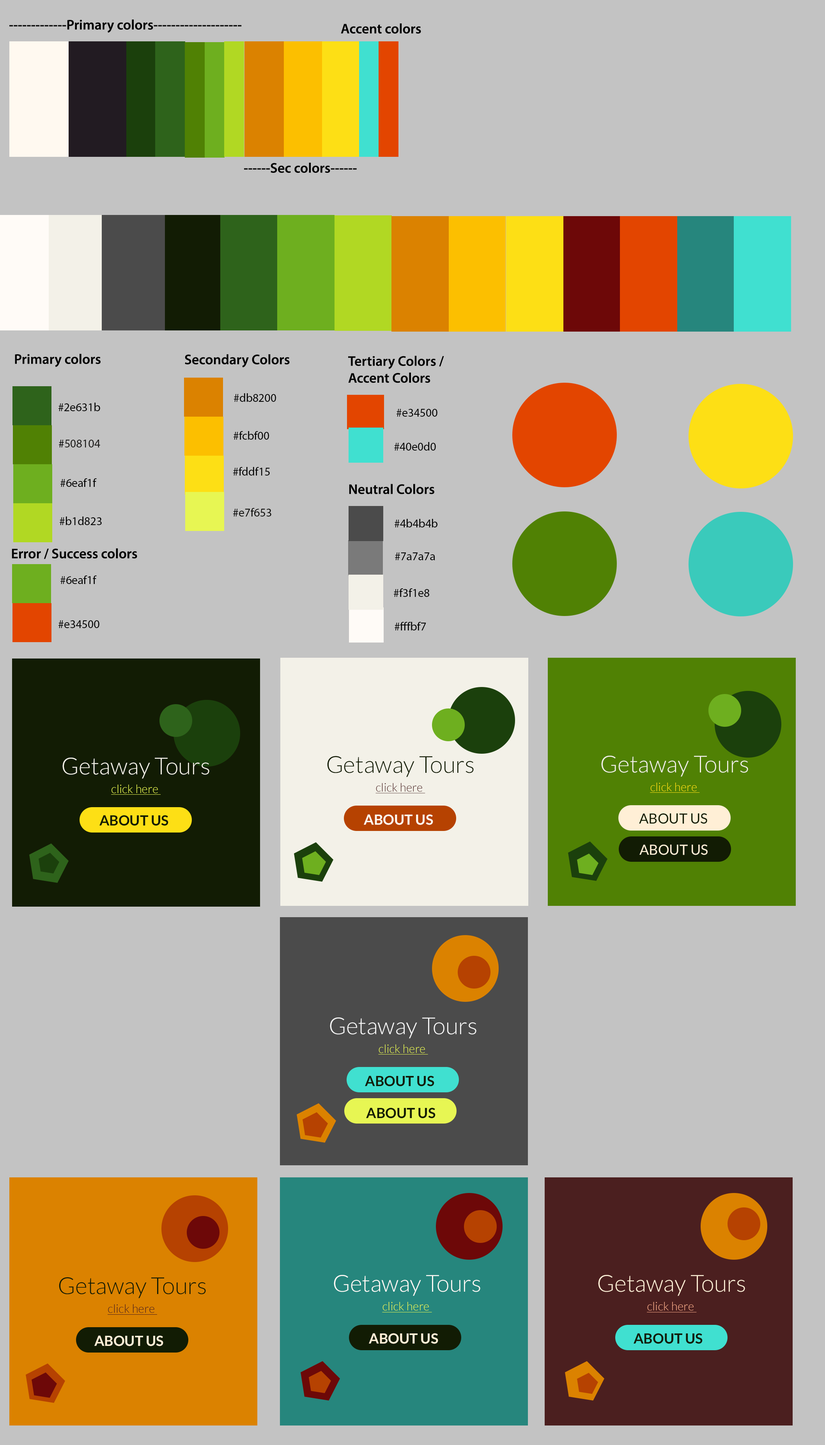
<style>
.page{position:relative;width:825px;height:1445px;background:#c3c3c3}
.page>*{position:absolute;margin:0}
.t1{font:14px "MyriadPro-Semibold";color:#000000}
.t2{font:11.7px "MyriadPro-Regular";color:#000000}
.t3{font:11.7px "MyriadPro-Regular";color:#181716}
.t4{font:11.7px "MyriadPro-Regular";color:#0c0c0a}
.t5{font:23.4px "Lato-Light";color:#f3f1e8}
.t6{font:23.4px "Lato-Light";color:#121c04}
.t7{font:11.7px "Lato-Light";color:#e7f653;text-decoration:underline}
.t8{font:11.7px "Lato-Light";color:#4b1f1f;text-decoration:underline}
.t9{font:11.7px "Lato-Light";color:#fddf15;text-decoration:underline}
.t10{font:14px "Lato-Bold";color:#121c04}
.t11{font:14px "Lato-Bold";color:#fff9f0}
.t12{font:14px "Lato-Regular";color:#121c04}
.t13{font:14px "Lato-Regular";color:#ffefd6}
.t14{font:23.4px "Lato-Light";color:#f7f7f7}
.t15{font:23.4px "Lato-Light";color:#fffbf7}
.t16{font:23.4px "Lato-Light";color:#ffefd6}
.t17{font:11.7px "Lato-Light";color:#f9aa89;text-decoration:underline}
.t18{font:14px "Lato-Bold";color:#ffefd6}
</style>
<div class="page">
<p class="t1" style="left:9px;top:20px;width:233px;height:13px">-------------Primary colors--------------------</p>
<p class="t1" style="left:341px;top:23px;width:80px;height:11px">Accent colors</p>
<p class="t1" style="left:244px;top:163px;width:113px;height:10px">------Sec colors------</p>
<p class="t1" style="left:15px;top:354px;width:86px;height:13px">Primary colors</p>
<p class="t1" style="left:185px;top:354px;width:105px;height:13px">Secondary Colors</p>
<p class="t1" style="left:348px;top:356px;width:96px;height:27px">Tertiary Colors / <br>Accent Colors</p>
<p class="t2" style="left:234px;top:393px;width:42px;height:9px">#db8200</p>
<p class="t2" style="left:59px;top:403px;width:41px;height:8px">#2e631b</p>
<p class="t2" style="left:397px;top:409px;width:41px;height:8px">#e34500</p>
<p class="t2" style="left:234px;top:431px;width:35px;height:9px">#fcbf00</p>
<p class="t3" style="left:59px;top:440px;width:41px;height:7px"><span class="t2">#</span>508104</p>
<p class="t2" style="left:394px;top:442px;width:42px;height:9px">#40e0d0</p>
<p class="t2" style="left:233px;top:467px;width:37px;height:8px">#fddf15</p>
<p class="t2" style="left:60px;top:478px;width:37px;height:9px">#6eaf1f</p>
<p class="t1" style="left:349px;top:484px;width:86px;height:10px">Neutral Colors</p>
<p class="t4" style="left:233px;top:508px;width:38px;height:8px"><span class="t2">#</span>e7f653</p>
<p class="t2" style="left:60px;top:516px;width:42px;height:9px">#b1d823</p>
<p class="t2" style="left:395px;top:519px;width:43px;height:8px">#4b4b4b</p>
<p class="t1" style="left:12px;top:548px;width:125px;height:11px">Error / Success colors</p>
<p class="t2" style="left:395px;top:552px;width:40px;height:8px">#7a7a7a</p>
<p class="t2" style="left:60px;top:575px;width:37px;height:9px">#6eaf1f</p>
<p class="t2" style="left:394px;top:588px;width:35px;height:9px">#f3f1e8</p>
<p class="t2" style="left:59px;top:620px;width:40px;height:8px">#e34500</p>
<p class="t2" style="left:395px;top:622px;width:31px;height:8px">#fffbf7</p>
<p class="t5" style="left:62px;top:757px;width:147px;height:22px">Getaway Tours</p>
<p class="t6" style="left:327px;top:756px;width:147px;height:21px">Getaway Tours</p>
<p class="t5" style="left:601px;top:756px;width:148px;height:21px">Getaway Tours</p>
<p class="t7" style="left:111px;top:784px;width:50px;height:11px">click here</p>
<p class="t8" style="left:376px;top:783px;width:50px;height:10px">click here</p>
<p class="t9" style="left:650px;top:782px;width:50px;height:11px">click here</p>
<p class="t10" style="left:99px;top:815px;width:70px;height:11px">ABOUT US</p>
<p class="t11" style="left:364px;top:814px;width:69px;height:11px">ABOUT US</p>
<p class="t12" style="left:639px;top:813px;width:69px;height:11px">ABOUT US</p>
<p class="t13" style="left:640px;top:844px;width:68px;height:11px">ABOUT US</p>
<p class="t14" style="left:330px;top:1017px;width:147px;height:21px">Getaway Tours</p>
<p class="t7" style="left:378px;top:1044px;width:50px;height:10px">click here</p>
<p class="t10" style="left:365px;top:1075px;width:70px;height:11px">ABOUT US</p>
<p class="t10" style="left:366px;top:1107px;width:70px;height:11px">ABOUT US</p>
<p class="t6" style="left:59px;top:1277px;width:147px;height:21px">Getaway Tours</p>
<p class="t15" style="left:334px;top:1275px;width:147px;height:21px">Getaway Tours</p>
<p class="t16" style="left:598px;top:1275px;width:147px;height:21px">Getaway Tours</p>
<p class="t7" style="left:382px;top:1302px;width:50px;height:10px">click here</p>
<p class="t17" style="left:647px;top:1302px;width:50px;height:10px">click here</p>
<p class="t8" style="left:108px;top:1304px;width:49px;height:10px">click here</p>
<p class="t18" style="left:94px;top:1335px;width:69px;height:11px">ABOUT US</p>
<p class="t18" style="left:369px;top:1333px;width:69px;height:11px">ABOUT US</p>
<p class="t10" style="left:634px;top:1333px;width:69px;height:11px">ABOUT US</p>
</div>
